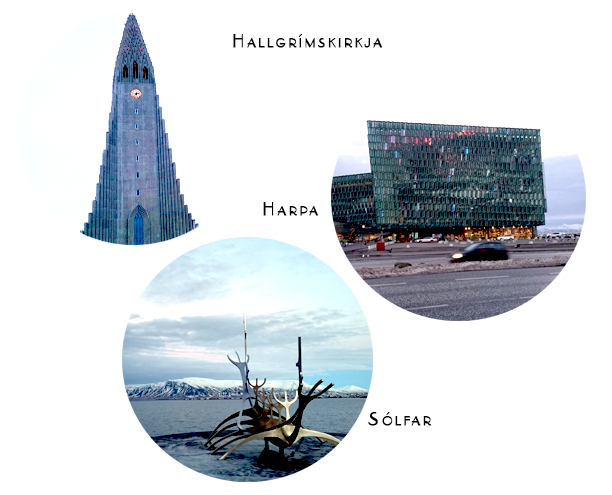
<style>
.page{position:relative;width:612px;height:495px;background:#ffffff}
.page>*{position:absolute;margin:0}
.t1{font:18px "ParisianBT-Regular";letter-spacing:0.2em;color:#000000;font-variant:small-caps;font-weight:bold}
</style>
<div class="page">
<p class="t1" style="left:233px;top:34px;width:150px;height:14px">Hallgrímskirkja</p>
<p class="t1" style="left:263px;top:202px;width:56px;height:14px">Harpa</p>
<p class="t1" style="left:368px;top:412px;width:63px;height:14px">Sólfar</p>
</div>
